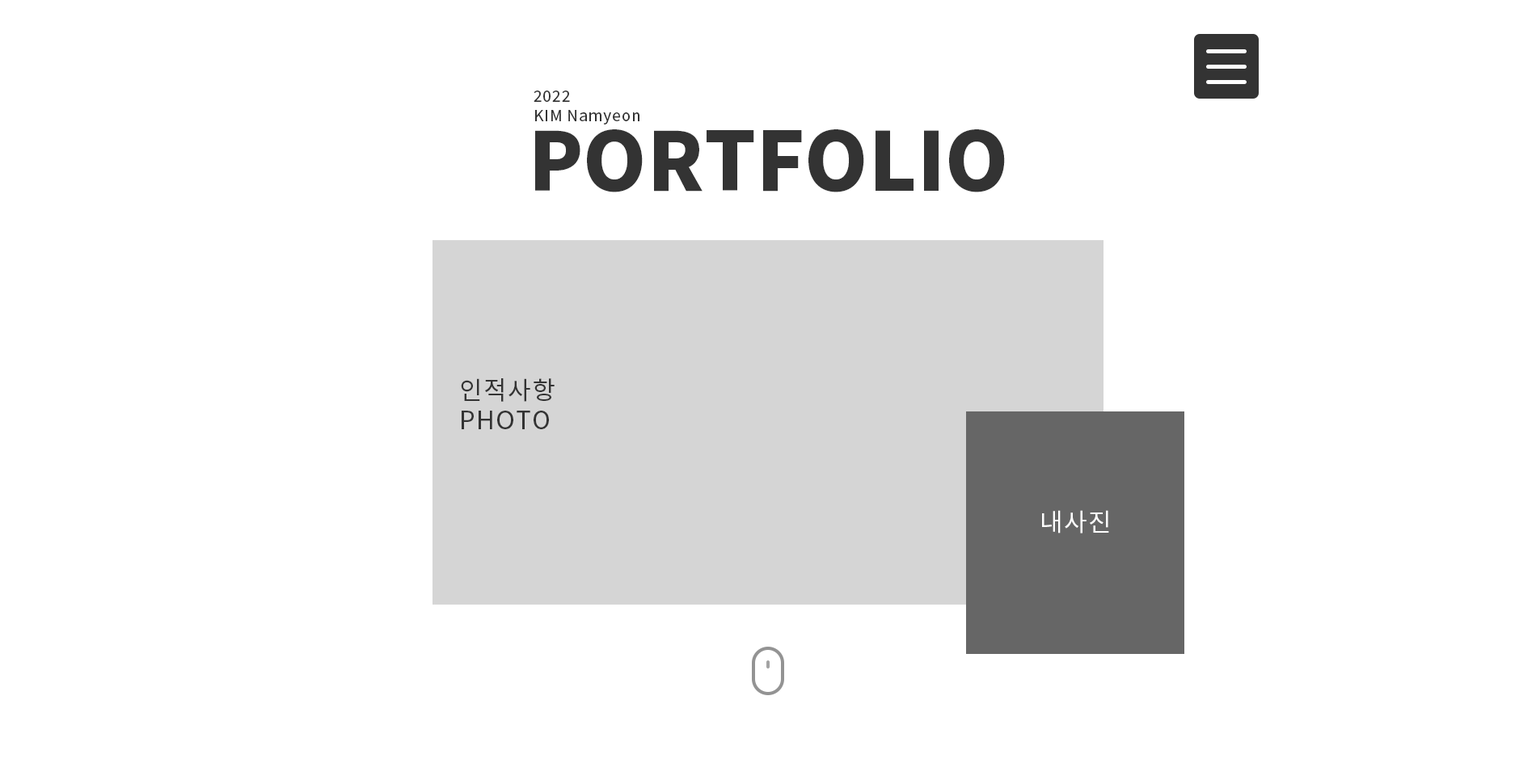
<style>
.page{position:relative;width:1536px;height:776px;background:#ffffff}
.page>*{position:absolute;margin:0}
.t1{font:15.4px "NotoSansKR-Regular";letter-spacing:0.05em;color:#333333}
.t2{font:80.9px "NotoSansKR-Black";color:#333333}
.t3{font:25.1px/29.9px "NotoSansKR-Regular";letter-spacing:0.05em;color:#333333}
.t4{font:25.1px "NotoSansKR-Regular";letter-spacing:0.05em;color:#ffffff}
</style>
<div class="page">
<p class="t1" style="left:534px;top:91px;width:36px;height:11px">2022</p>
<p class="t1" style="left:535px;top:110px;width:105px;height:15px">KIM Namyeon</p>
<p class="t2" style="left:535px;top:129px;width:470px;height:63px">PORTFOLIO</p>
<p class="t3" style="left:461px;top:378px;width:94px;height:51px">인적사항<br>PHOTO</p>
<p class="t4" style="left:1042px;top:510px;width:67px;height:24px">내사진</p>
</div>
